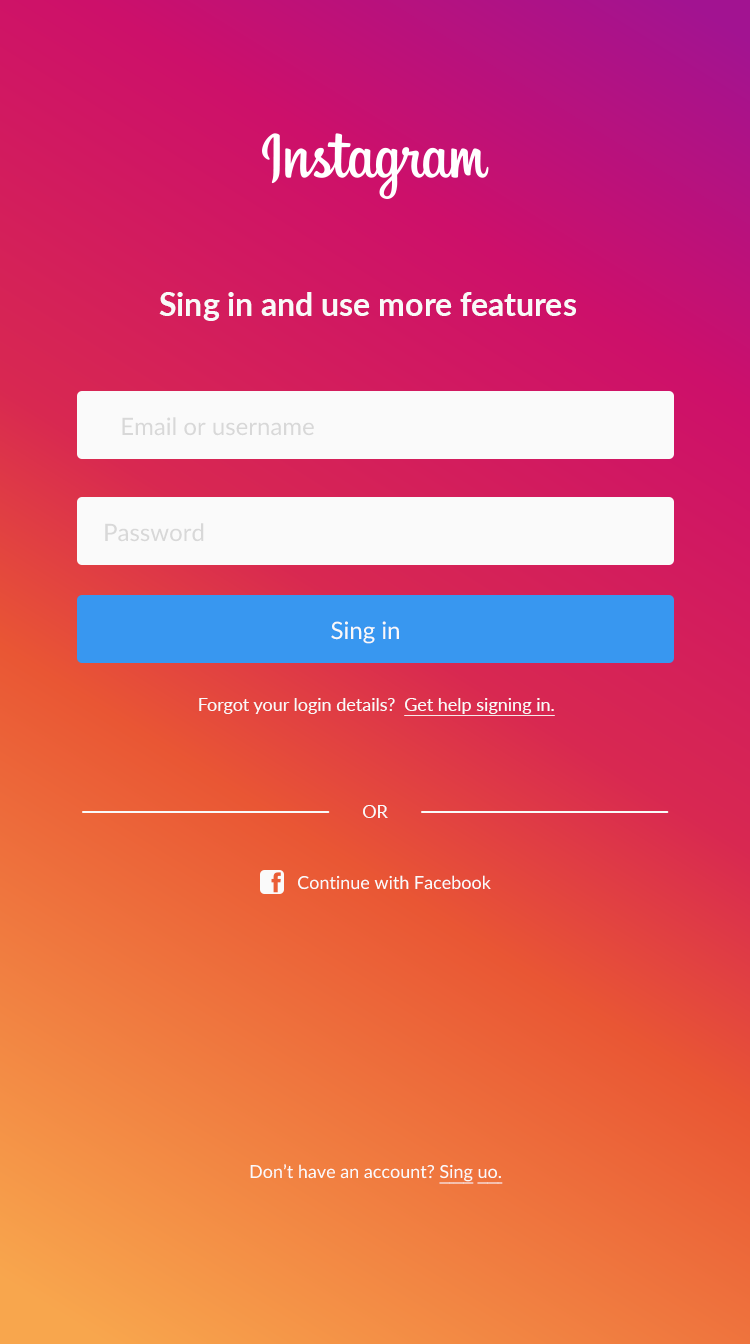
<style>
.page{position:relative;width:750px;height:1344px}
.page>*{position:absolute;margin:0}
.t1{font:32px "Lato-Bold";color:#f9f9f9}
.t2{font:24px "Lato-Regular";color:#d8d8d8}
.t3{font:24px "Lato-Regular";color:#f9f9f9}
.t4{font:18px "Lato-Regular";color:#f9f9f9}
.t5{font:18px "Lato-Regular";color:#fafafa;text-decoration:underline}
.t6{font:18px "Lato-Regular";color:#fafafa}
</style>
<div class="page">
<p class="t1" style="left:159px;top:292px;width:417px;height:29px">Sing in and use more features</p>
<p class="t2" style="left:122px;top:417px;width:192px;height:19px">Email or username</p>
<p class="t2" style="left:105px;top:523px;width:99px;height:19px">Password</p>
<p class="t3" style="left:331px;top:621px;width:68px;height:23px">Sing in</p>
<p class="t4" style="left:199px;top:698px;width:196px;height:16px">Forgot your login details?</p>
<p class="t5" style="left:404px;top:698px;width:151px;height:18px">Get help signing in.</p>
<p class="t6" style="left:363px;top:805px;width:25px;height:13px">OR</p>
<p class="t6" style="left:298px;top:875px;width:193px;height:15px">Continue with Facebook</p>
<p class="t6" style="left:250px;top:1164px;width:253px;height:20px">Don’t have an account? <span class="t5">Sing uo.</span></p>
</div>
